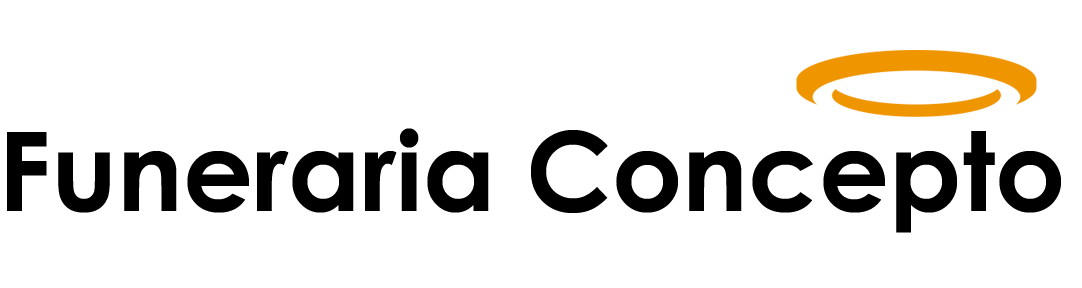
<style>
.page{position:relative;width:1082px;height:288px;background:#ffffff}
.page>*{position:absolute;margin:0}
.t1{font:110px "CenturyGothic-Bold";color:#000000}
</style>
<div class="page">
<p class="t1" style="left:7px;top:128px;width:1054px;height:105px">Funeraria Concepto</p>
</div>
